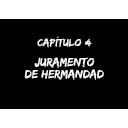
<style>
.page{position:relative;width:128px;height:128px;background:#000000}
.page>*{position:absolute;margin:0}
.t1{font:10.7px "EdoSZ";color:#ffffff;scale:1.05 1}
.t2{font:12.3px/11.8px "EdoSZ";color:#ffffff}
</style>
<div class="page">
<p class="t1" style="left:37px;top:36px;width:55px;height:12px">Capítulo 4</p>
<p class="t2" style="left:24px;top:57px;width:80px;height:23px;text-align:center">Juramento<br>de hermandad</p>
</div>
